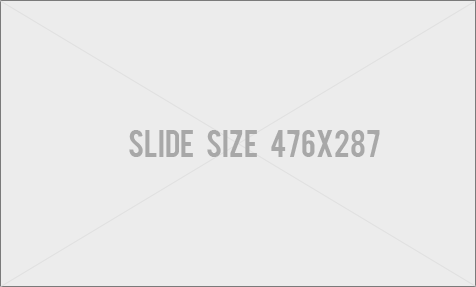
<style>
.page{position:relative;width:476px;height:287px;background:#ececec}
.page>*{position:absolute;margin:0}
.t1{font:30px "Bebas";color:#a8a8a8}
</style>
<div class="page">
<p class="t1" style="left:129px;top:130px;width:251px;height:27px">slide    size    476x287</p>
</div>
